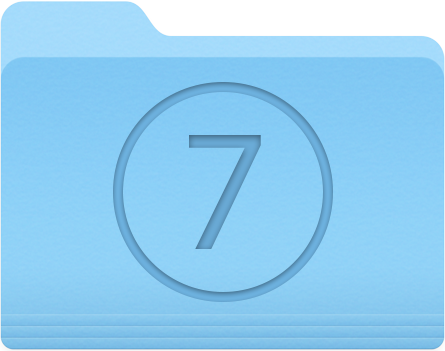
<style>
.page{position:relative;width:445px;height:351px}
.page>*{position:absolute;margin:0}
.t1{font:175px "MyriadPro-Regular";color:#6aabd7}
</style>
<div class="page">
<p class="t1" style="left:189px;top:135px;width:72px;height:114px">7</p>
</div>
